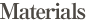
<style>
.page{position:relative;width:96px;height:22px;background:#ffffff}
.page>*{position:absolute;margin:0}
.t1{font:22px "RyuminPro-ExBold";letter-spacing:-0.08em;color:#4c4843}
</style>
<div class="page">
<p class="t1" style="left:0px;top:2px;width:86px;height:18px">Materials</p>
</div>
